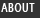
<style>
.page{position:relative;width:40px;height:18px;background:#333333}
.page>*{position:absolute;margin:0}
.t1{font:12.2px "MalgunGothicBold";letter-spacing:0.05em;color:#ffffff;text-transform:uppercase;scale:0.75 1}
</style>
<div class="page">
<p class="t1" style="left:1px;top:3px;width:34px;height:9px">about</p>
</div>
